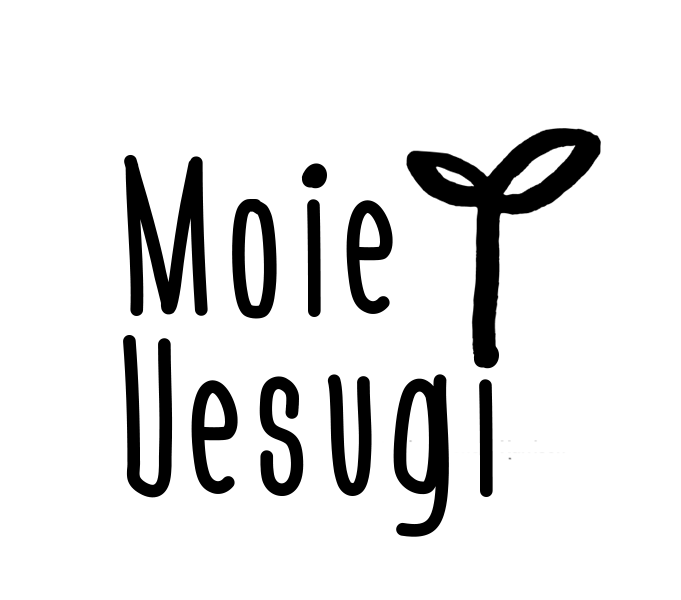
<style>
.page{position:relative;width:681px;height:600px;background:#ffffff}
.page>*{position:absolute;margin:0}
.t1{font:216.7px "Engine-Regular";color:#000000}
</style>
<div class="page">
<p class="t1" style="left:124px;top:154px;width:269px;height:165px">Moie</p>
<p class="t1" style="left:123px;top:335px;width:376px;height:202px">Uesugi</p>
</div>
